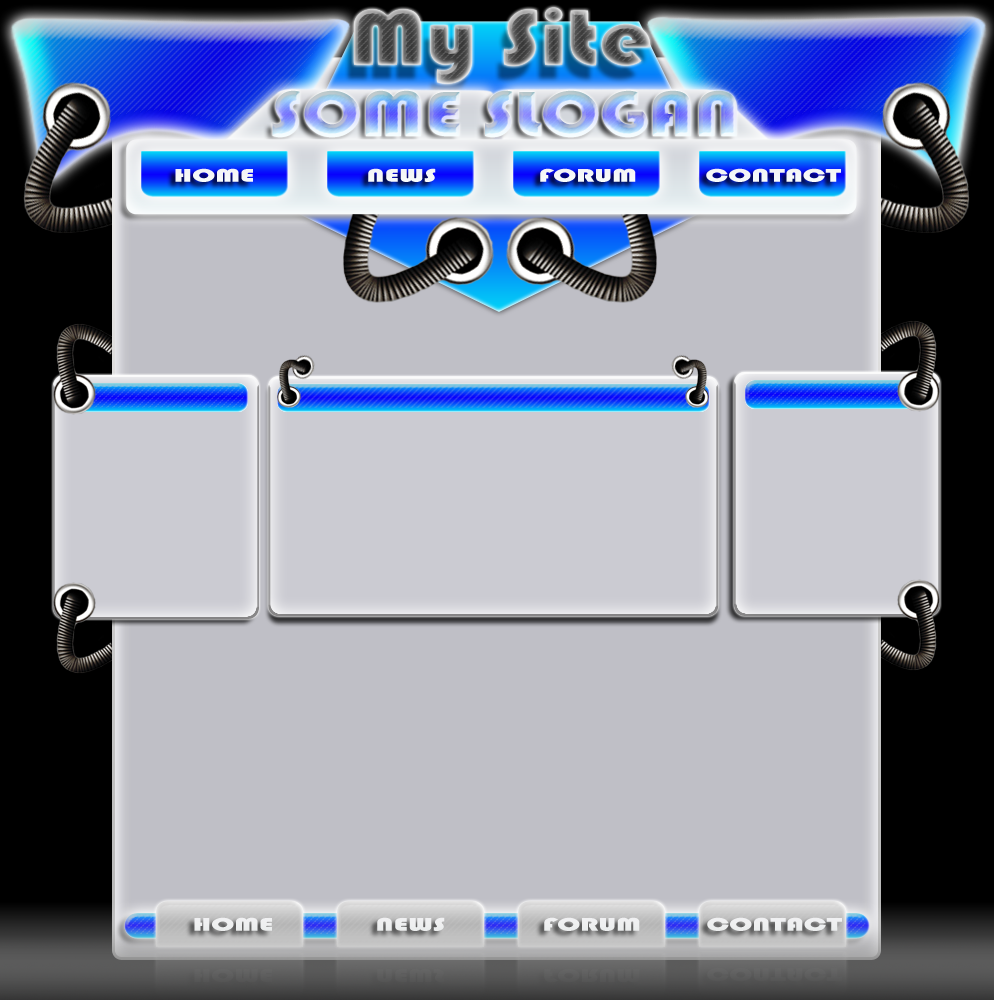
<style>
.page{position:relative;width:994px;height:1000px;background:#bfbfc6}
.page>*{position:absolute;margin:0}
.t1{font:81.2px "Bauhaus93";scale:1.17 1}
.t2{font:66.4px "Bauhaus93";scale:1.18 1}
.t3{font:19px "Bauhaus93";color:#ffffff;scale:1.6 1}
</style>
<div class="page">
<p class="t1" style="left:354px;top:7px;width:296px;height:77px">My Site</p>
<p class="t2" style="left:272px;top:90px;width:465px;height:48px">SOME SLOGAN</p>
<p class="t3" style="left:175px;top:168px;width:78px;height:14px">HOME</p>
<p class="t3" style="left:368px;top:168px;width:68px;height:14px">NEWS</p>
<p class="t3" style="left:540px;top:168px;width:96px;height:14px">FORUM</p>
<p class="t3" style="left:706px;top:168px;width:135px;height:14px">CONTACT</p>
<p class="t3" style="left:194px;top:917px;width:78px;height:14px">HOME</p>
<p class="t3" style="left:377px;top:917px;width:68px;height:14px">NEWS</p>
<p class="t3" style="left:544px;top:917px;width:96px;height:14px">FORUM</p>
<p class="t3" style="left:707px;top:917px;width:135px;height:14px">CONTACT</p>
</div>
